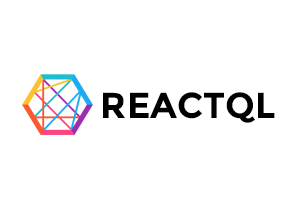
<style>
.page{position:relative;width:300px;height:200px;background:#ffffff}
.page>*{position:absolute;margin:0}
.t1{font:36px "Montserrat-Bold";color:#000000}
</style>
<div class="page">
<p class="t1" style="left:103px;top:92px;width:172px;height:31px">REACTQL</p>
</div>
